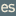
<style>
.page{position:relative;width:16px;height:16px;background:#586e75}
.page>*{position:absolute;margin:0}
.t1{font:16px "DINPro-Regular";letter-spacing:-0.075em;color:#eee8d5}
</style>
<div class="page">
<p class="t1" style="left:1px;top:3px;width:14px;height:10px">es</p>
</div>
